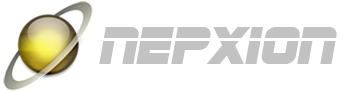
<style>
.page{position:relative;width:362px;height:91px;background:#ffffff}
.page>*{position:absolute;margin:0}
.t1{font:56px "SFSportsNight";color:#c2c2c2}
</style>
<div class="page">
<p class="t1" style="left:99px;top:27px;width:238px;height:37px">Nepxion</p>
</div>
